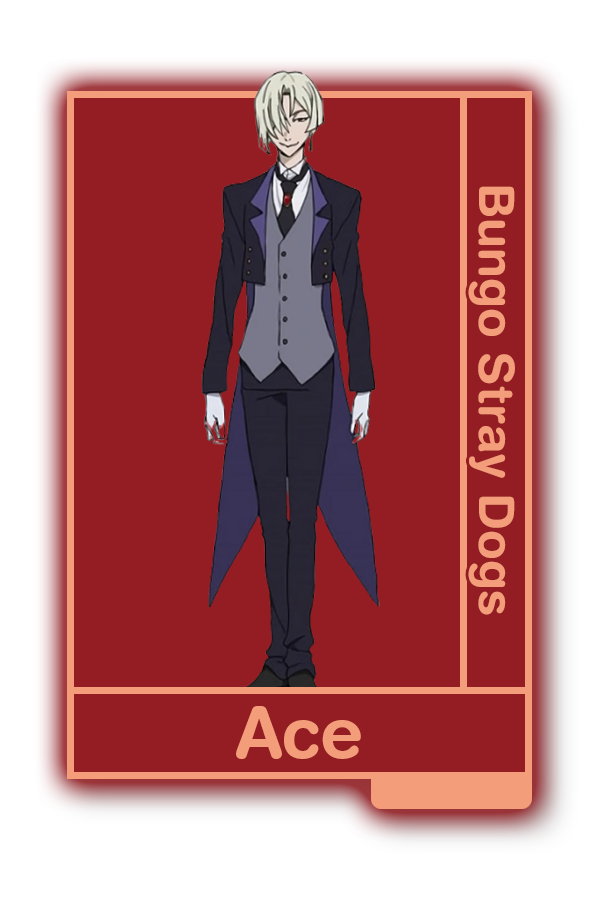
<style>
.page{position:relative;width:600px;height:900px;background:#941d23}
.page>*{position:absolute;margin:0}
.t1{font:48.8px "HelveticaRounded-Bold";color:#f39d7b}
.t2{font:70.8px "HelveticaRounded-Bold";color:#f39d7b}
</style>
<div class="page">
<p class="t1" style="left:468px;top:186px;width:47px;height:429px;rotate:90deg">Bungo Stray Dogs</p>
<p class="t2" style="left:236px;top:706px;width:125px;height:53px">Ace</p>
</div>
